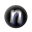
<style>
.page{position:relative;width:32px;height:32px;background:#ffffff}
.page>*{position:absolute;margin:0}
.t1{font:24px "Candara-Italic"}
</style>
<div class="page">
<p class="t1" style="left:10px;top:10px;width:11px;height:13px">n</p>
</div>
